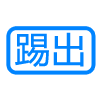
<style>
.page{position:relative;width:100px;height:100px;background:#ffffff}
.page>*{position:absolute;margin:0}
.t1{font:36px "MicrosoftYaHei";color:#0084ff}
</style>
<div class="page">
<p class="t1" style="left:15px;top:32px;width:69px;height:35px">踢出</p>
</div>
